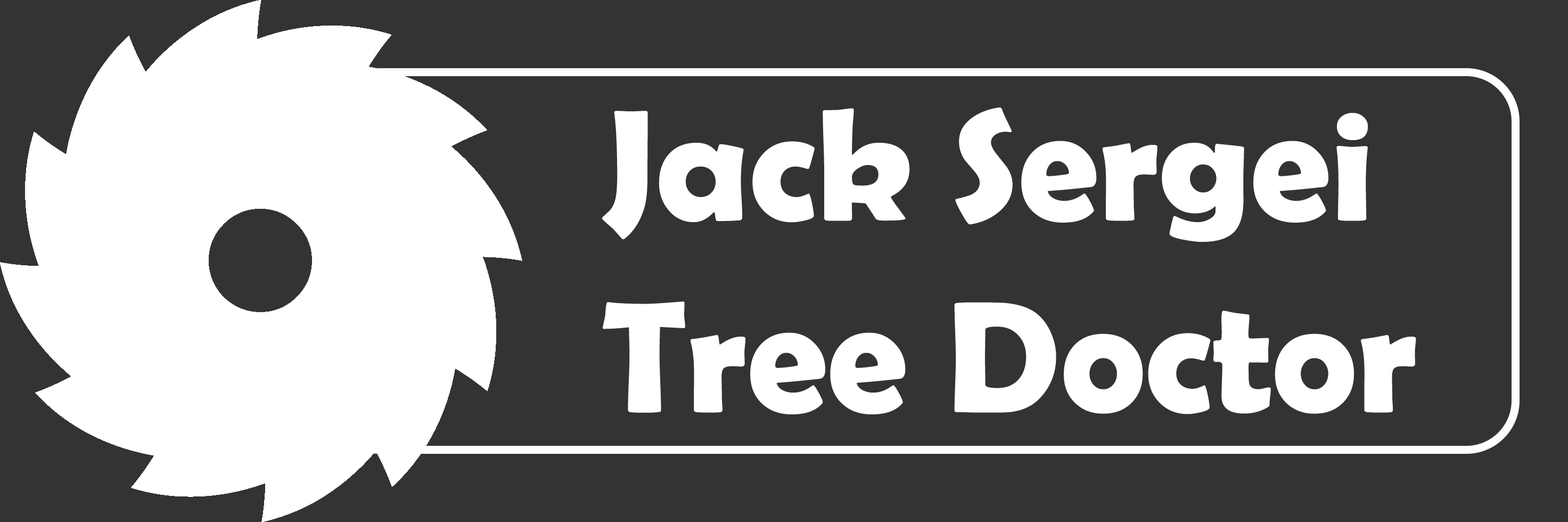
<style>
.page{position:relative;width:1568px;height:522px;background:#333333}
.page>*{position:absolute;margin:0}
.t1{font:159.7px "BerlinSansFBDemi-Bold";color:#ffffff}
</style>
<div class="page">
<p class="t1" style="left:602px;top:107px;width:814px;height:307px">Jack Sergei<br>Tree Doctor</p>
</div>
